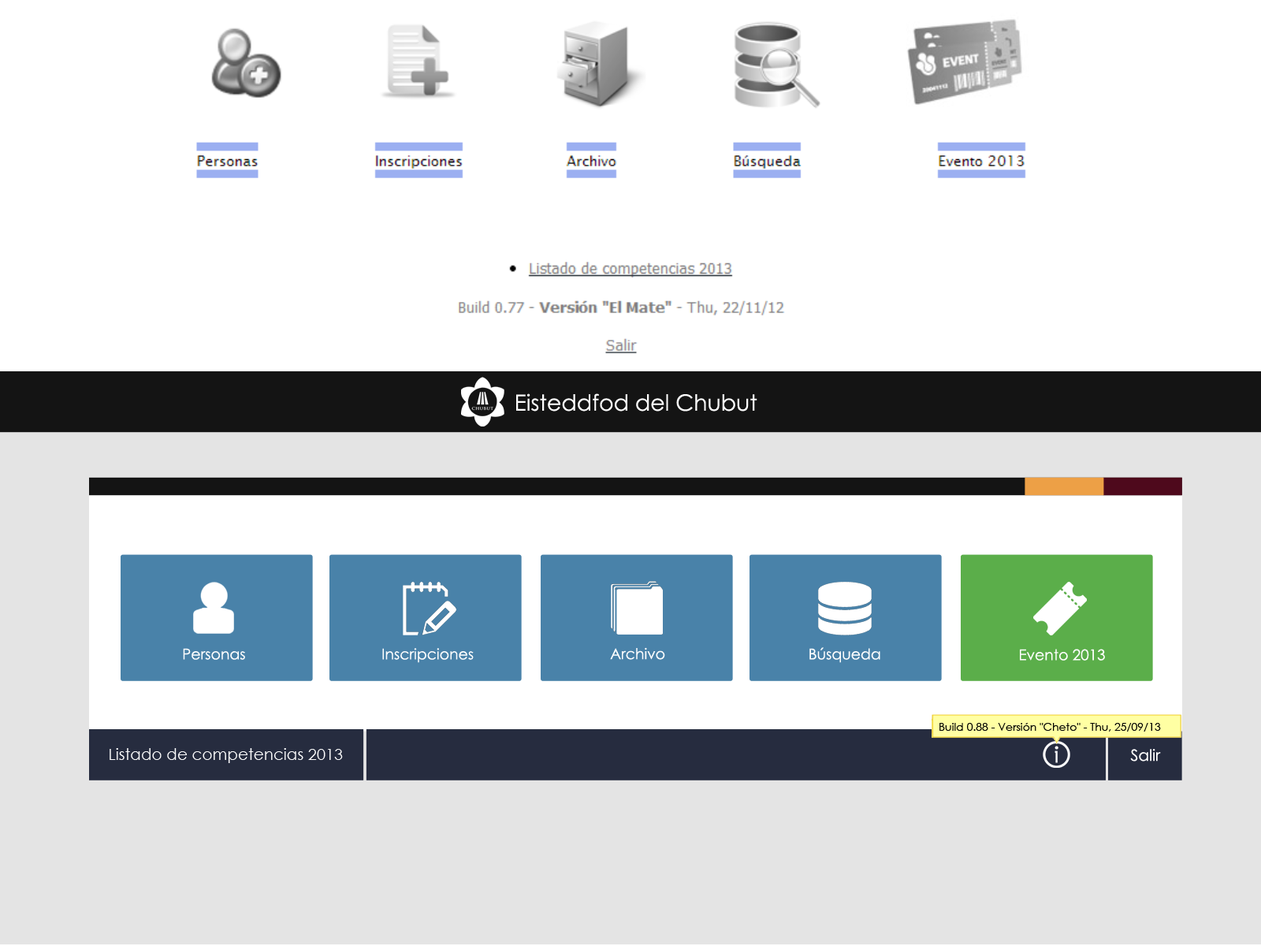
<style>
.page{position:relative;width:1261px;height:946px;background:#ffffff}
.page>*{position:absolute;margin:0}
.t1{font:22.3px "CenturyGothic";color:#ffffff}
.t2{font:14.9px "CenturyGothic";color:#ffffff}
.t3{font:11px "CenturyGothic";color:#000000}
.t4{font:15.8px "CenturyGothic";color:#ffffff}
</style>
<div class="page">
<p class="t1" style="left:516px;top:393px;width:241px;height:18px">Eisteddfod del Chubut</p>
<p class="t2" style="left:183px;top:648px;width:62px;height:12px">Personas</p>
<p class="t2" style="left:382px;top:648px;width:92px;height:15px">Inscripciones</p>
<p class="t2" style="left:610px;top:647px;width:55px;height:13px">Archivo</p>
<p class="t2" style="left:809px;top:647px;width:71px;height:16px">Búsqueda</p>
<p class="t2" style="left:1020px;top:649px;width:85px;height:11px">Evento 2013</p>
<p class="t3" style="left:939px;top:723px;width:222px;height:8px">Build 0.88 - Versión "Cheto" - Thu, 25/09/13</p>
<p class="t4" style="left:110px;top:748px;width:233px;height:15px">Listado de competencias 2013</p>
<p class="t4" style="left:1130px;top:749px;width:31px;height:12px">Salir</p>
</div>
